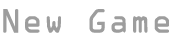
<style>
.page{position:relative;width:173px;height:41px;background:#ffffff}
.page>*{position:absolute;margin:0}
.t1{font:30px "OCRAStd";color:#9d9d9d}
</style>
<div class="page">
<p class="t1" style="left:3px;top:9px;width:166px;height:24px">New Game</p>
</div>
